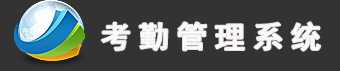
<style>
.page{position:relative;width:340px;height:71px;background:#333333}
.page>*{position:absolute;margin:0}
.t1{font:30px "SimHei";letter-spacing:0.24em;color:#f7fbfd;font-weight:bold}
</style>
<div class="page">
<p class="t1" style="left:101px;top:22px;width:220px;height:29px">考勤管理系统</p>
</div>
